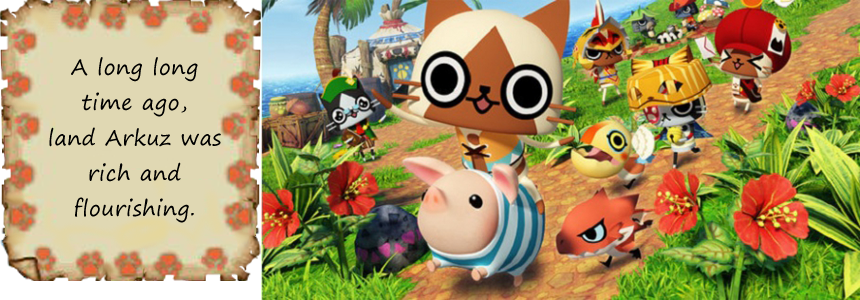
<style>
.page{position:relative;width:860px;height:300px}
.page>*{position:absolute;margin:0}
.t1{font:21.2px/35.3px "SegoePrint";letter-spacing:0.025em;color:#000000}
</style>
<div class="page">
<p class="t1" style="left:49px;top:57px;width:172px;height:166px;text-align:center">A long long time ago, <br>land Arkuz was rich and <br>flourishing.</p>
</div>
